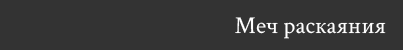
<style>
.page{position:relative;width:403px;height:50px;background:#333333}
.page>*{position:absolute;margin:0}
.t1{font:24px "CrimsonText-Regular";color:#ffffff}
</style>
<div class="page">
<p class="t1" style="left:235px;top:17px;width:151px;height:22px">Меч раскаяния</p>
</div>
